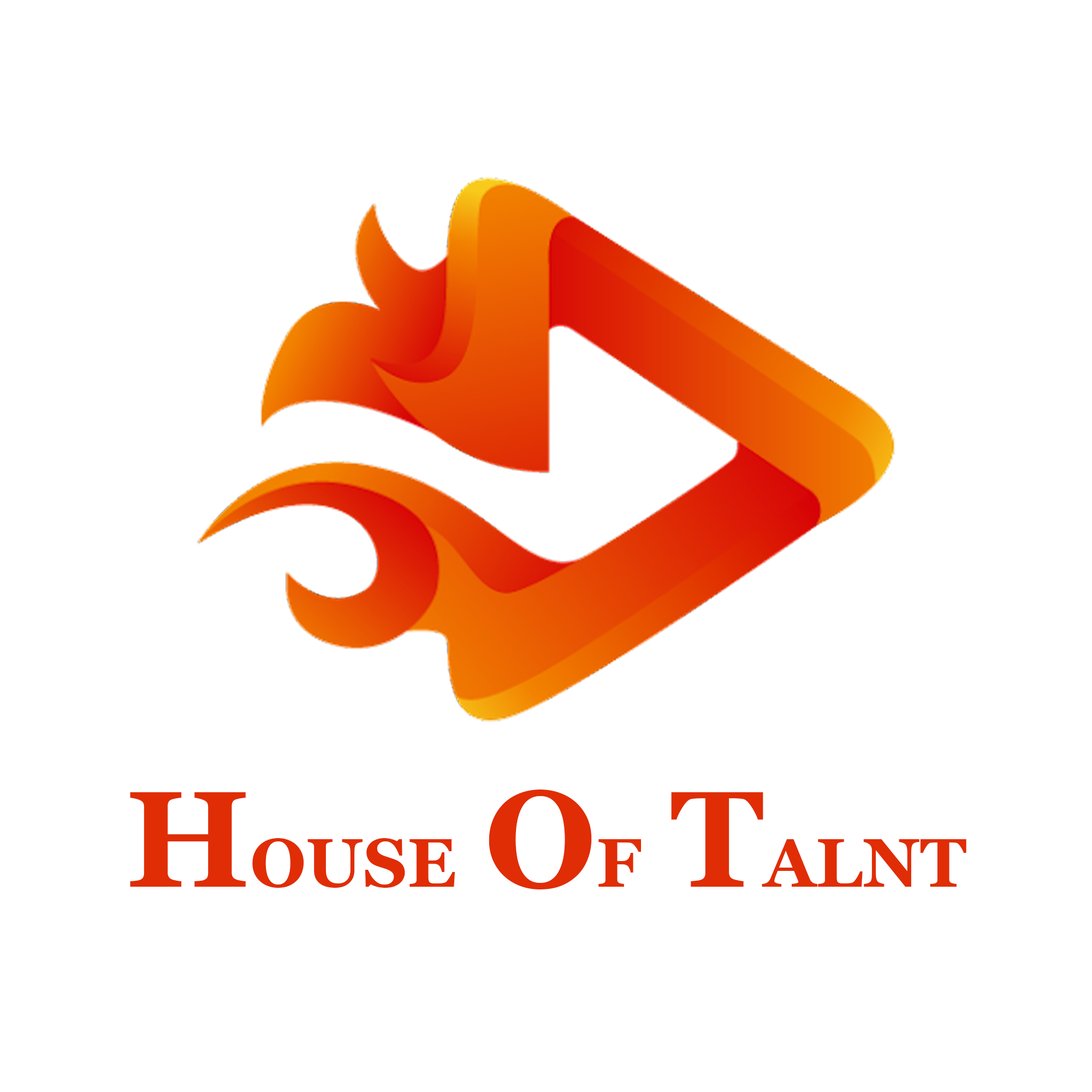
<style>
.page{position:relative;width:1092px;height:1092px;background:#ffffff}
.page>*{position:absolute;margin:0}
.t1{font:68.2px "Georgia-Bold";color:#e02d05}
.t2{font:136.5px "Georgia-Bold";color:#e02d05}
</style>
<div class="page">
<p class="t1" style="left:130px;top:790px;width:836px;height:99px"><span class="t2">H</span>OUSE <span class="t2">O</span>F <span class="t2">T</span>ALNT</p>
</div>
